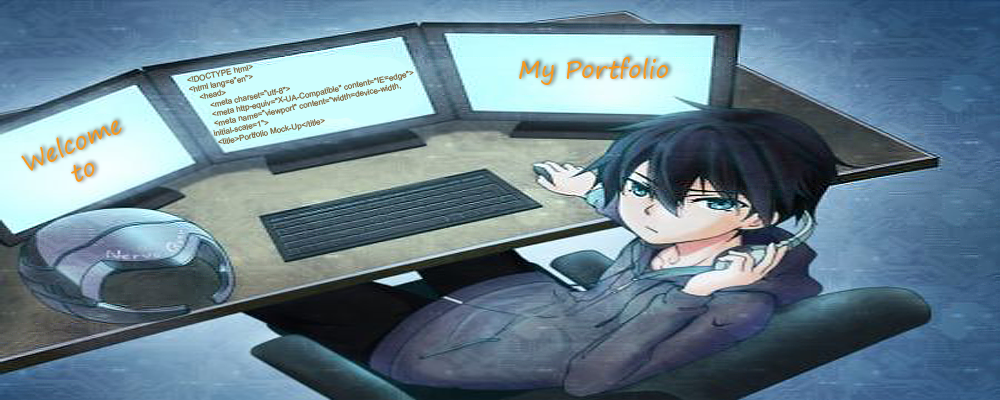
<style>
.page{position:relative;width:1000px;height:400px}
.page>*{position:absolute;margin:0}
.t1{font:8px "ArialMT";color:#7f623c}
.t2{font:24px "SegoePrint";color:#f8981c}
</style>
<div class="page">
<p class="t1" style="left:187px;top:65px;width:227px;height:79px;rotate:-12deg">&lt;!DOCTYPE html&gt;<br>&lt;html lang=e"en"&gt;<br>    &lt;head&gt;<br>        &lt;meta charset="utf-8"&gt;<br>        &lt;meta http-equiv="X-UA-Compatible" content="IE=edge"&gt;<br>        &lt;meta name="viewport" content="width=device-width,                   initial-scale=1"&gt;<br>        &lt;title&gt;Portfolio Mock-Up&lt;/title&gt;</p>
<p class="t2" style="left:519px;top:57px;width:149px;height:28px">My Portfolio</p>
<p class="t2" style="left:21px;top:120px;width:101px;height:62px;text-align:center;rotate:-23deg">Welcome<br>to</p>
</div>
